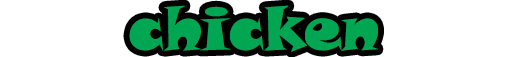
<style>
.page{position:relative;width:508px;height:57px;background:#ffffff}
.page>*{position:absolute;margin:0}
.t1{font:60px "SnapITC-Regular";color:#00a651}
</style>
<div class="page">
<p class="t1" style="left:129px;top:5px;width:249px;height:47px">chicken</p>
</div>
